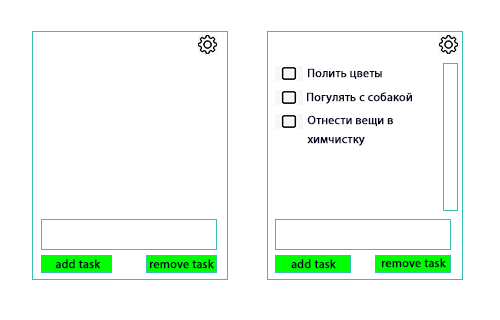
<style>
.page{position:relative;width:500px;height:320px;background:#ffffff}
.page>*{position:absolute;margin:0}
.t1{font:12px "MyriadPro-Regular";color:#04071d;font-weight:bold}
.t2{font:12px/36px "MyriadPro-Regular";color:#04071d;font-weight:bold}
</style>
<div class="page">
<p class="t1" style="left:308px;top:68px;width:74px;height:11px">Полить цветы</p>
<p class="t1" style="left:307px;top:92px;width:105px;height:12px">Погулять с собакой</p>
<p class="t2" style="left:307px;top:115px;width:86px;height:31px">Отнести вещи в <br>химчистку</p>
<p class="t1" style="left:55px;top:259px;width:46px;height:10px">add task</p>
<p class="t1" style="left:150px;top:259px;width:64px;height:10px">remove task</p>
<p class="t1" style="left:291px;top:259px;width:45px;height:10px">add task</p>
<p class="t1" style="left:382px;top:258px;width:64px;height:10px">remove task</p>
</div>
